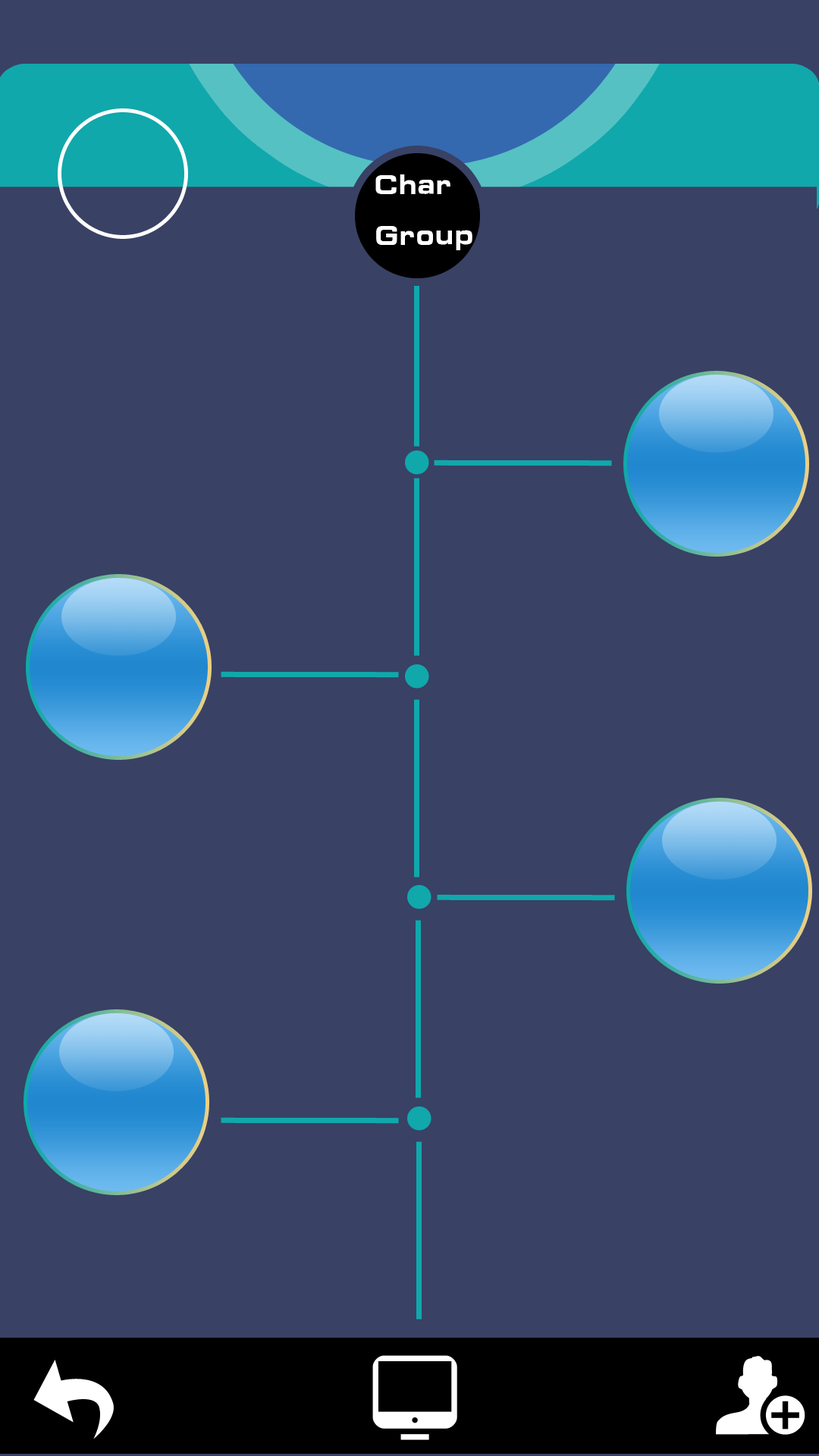
<style>
.page{position:relative;width:819px;height:1456px;background:#394165}
.page>*{position:absolute;margin:0}
.t1{font:29.4px "ç»å¸ç»¼èºä½ç®-regular";color:#ffffff}
</style>
<div class="page">
<p class="t1" style="left:375px;top:174px;width:97px;height:76px">Char<br>Group</p>
</div>
